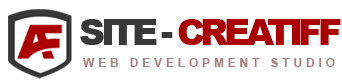
<style>
.page{position:relative;width:342px;height:80px;background:#ffffff}
.page>*{position:absolute;margin:0}
.t1{font:36px "Arial-Black";letter-spacing:-0.12em;color:#ab0000}
.t2{font:36px "Arial-Black";letter-spacing:-0.12em;color:#383838}
.t3{font:12px "Arial-BoldMT";letter-spacing:0.32em;color:#a98181;text-transform:uppercase}
</style>
<div class="page">
<p class="t1" style="left:80px;top:19px;width:261px;height:26px"><span class="t2">SITE - </span>CREATIFF</p>
<p class="t3" style="left:83px;top:58px;width:252px;height:9px">Web Development Studio</p>
</div>
